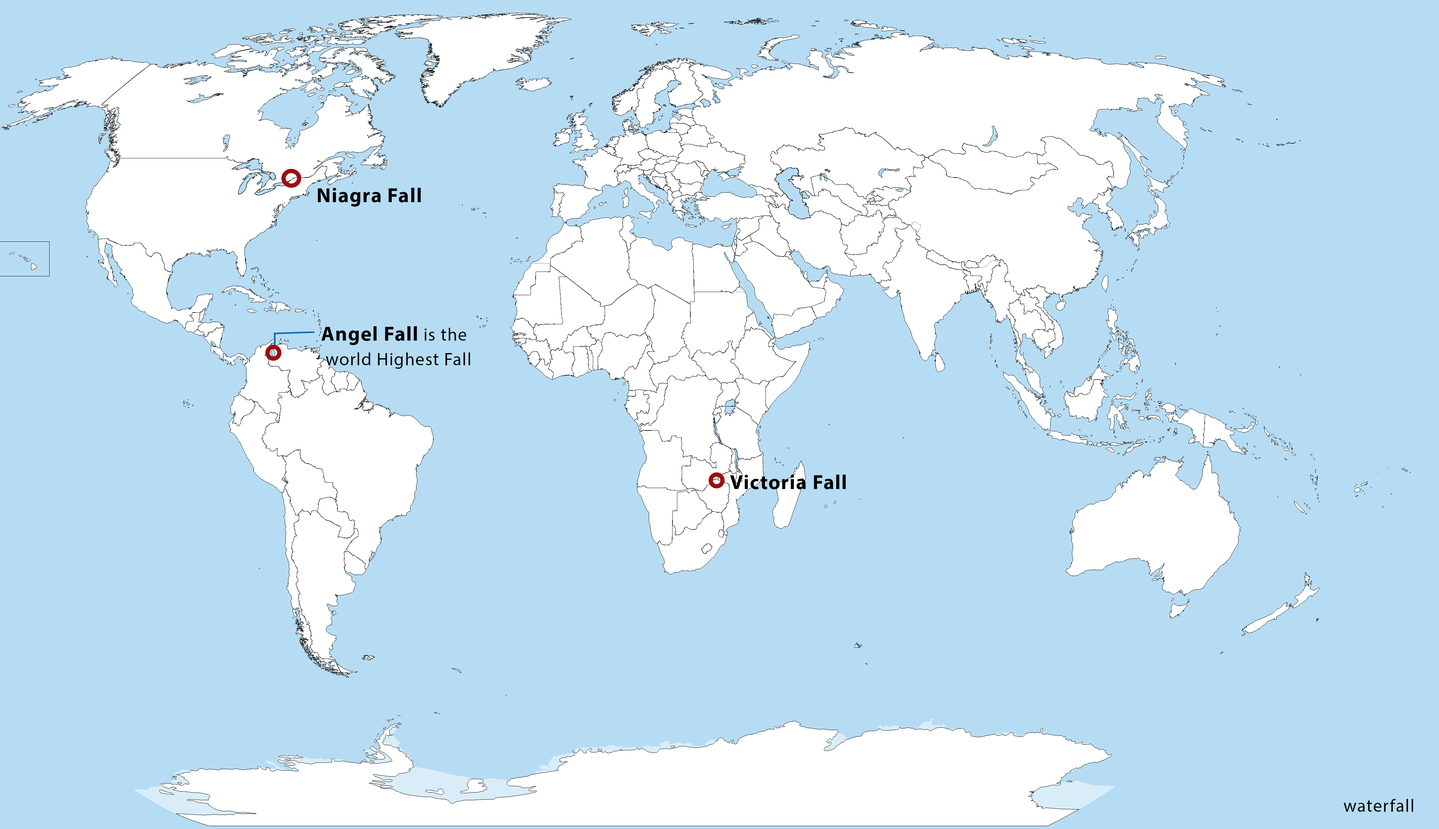
<style>
.page{position:relative;width:1439px;height:829px;background:#b6dcf4}
.page>*{position:absolute;margin:0}
.t1{font:20.5px "MyriadHebrew-Bold";letter-spacing:0.04em;color:#000000}
.t2{font:17.9px "MyriadHebrew-Regular";letter-spacing:0.04em;color:#000000}
</style>
<div class="page">
<p class="t1" style="left:318px;top:188px;width:103px;height:19px">Niagra Fall</p>
<p class="t2" style="left:321px;top:326px;width:149px;height:43px"><span class="t1">Angel Fall </span>is the<br> world Highest Fall</p>
<p class="t1" style="left:730px;top:474px;width:116px;height:15px">Victoria Fall</p>
<p class="t2" style="left:1344px;top:799px;width:69px;height:12px">waterfall</p>
</div>
